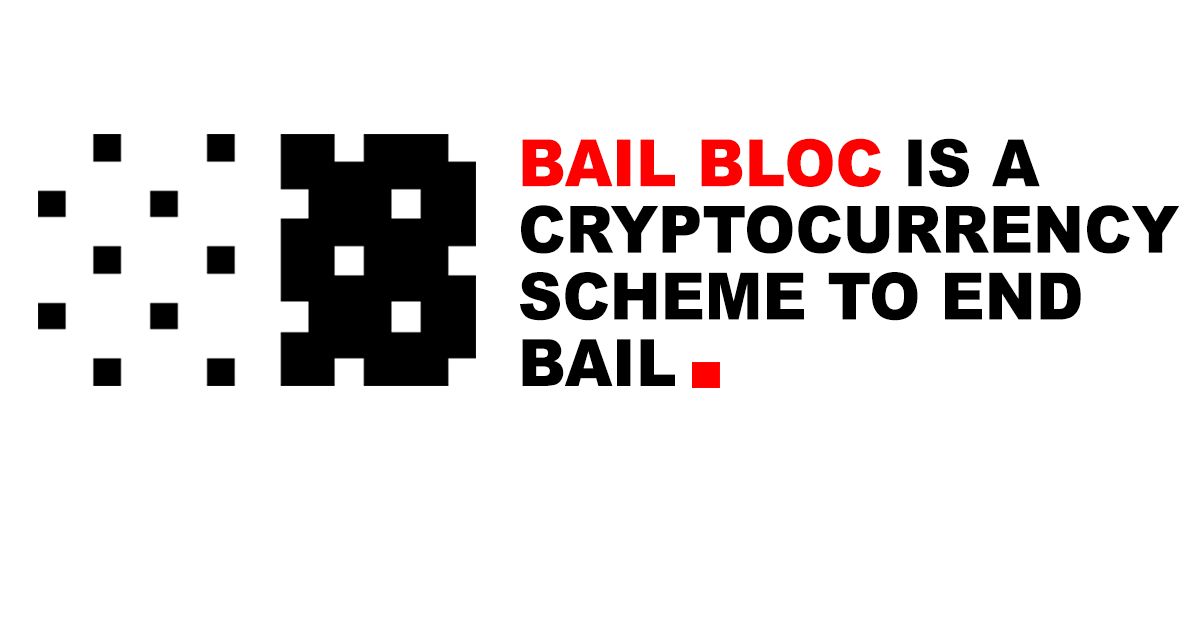
<style>
.page{position:relative;width:1200px;height:630px;background:#ffffff}
.page>*{position:absolute;margin:0}
.t1{font:65.2px/66.6px "Arial-Black";color:#000000;scale:0.94 1}
.t2{font:65.2px/66.6px "Arial-Black";color:#ff0000;scale:0.94 1}
</style>
<div class="page">
<p class="t1" style="left:520px;top:138px;width:660px;height:248px"><span class="t2">BAIL BLOC </span>IS A <br>CRYPTOCURRENCY <br>SCHEME TO END <br>BAIL</p>
</div>
